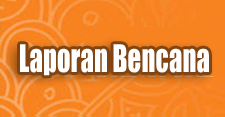
<style>
.page{position:relative;width:225px;height:117px}
.page>*{position:absolute;margin:0}
.t1{font:35.3px "Impact";color:#ffffff;scale:0.76 1}
.t2{font:48.1px "BrushScriptMT";color:#fff600;scale:0.76 1}
</style>
<div class="page">
<p class="t1" style="left:20px;top:44px;width:189px;height:32px"><span class="t2"><br></span>Laporan Bencana</p>
</div>
